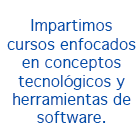
<style>
.page{position:relative;width:140px;height:140px;background:#ffffff}
.page>*{position:absolute;margin:0}
.t1{font:15.3px "Geneva";color:#0050ab}
</style>
<div class="page">
<p class="t1" style="left:7px;top:19px;width:129px;height:104px;text-align:center">Impartimos cursos enfocados en conceptos tecnológicos y herramientas de software.</p>
</div>
